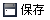
<style>
.page{position:relative;width:50px;height:20px;background:#ffffff}
.page>*{position:absolute;margin:0}
.t1{font:12px "SimSun";color:#000000}
</style>
<div class="page">
<p class="t1" style="left:21px;top:4px;width:23px;height:11px">保存</p>
</div>
